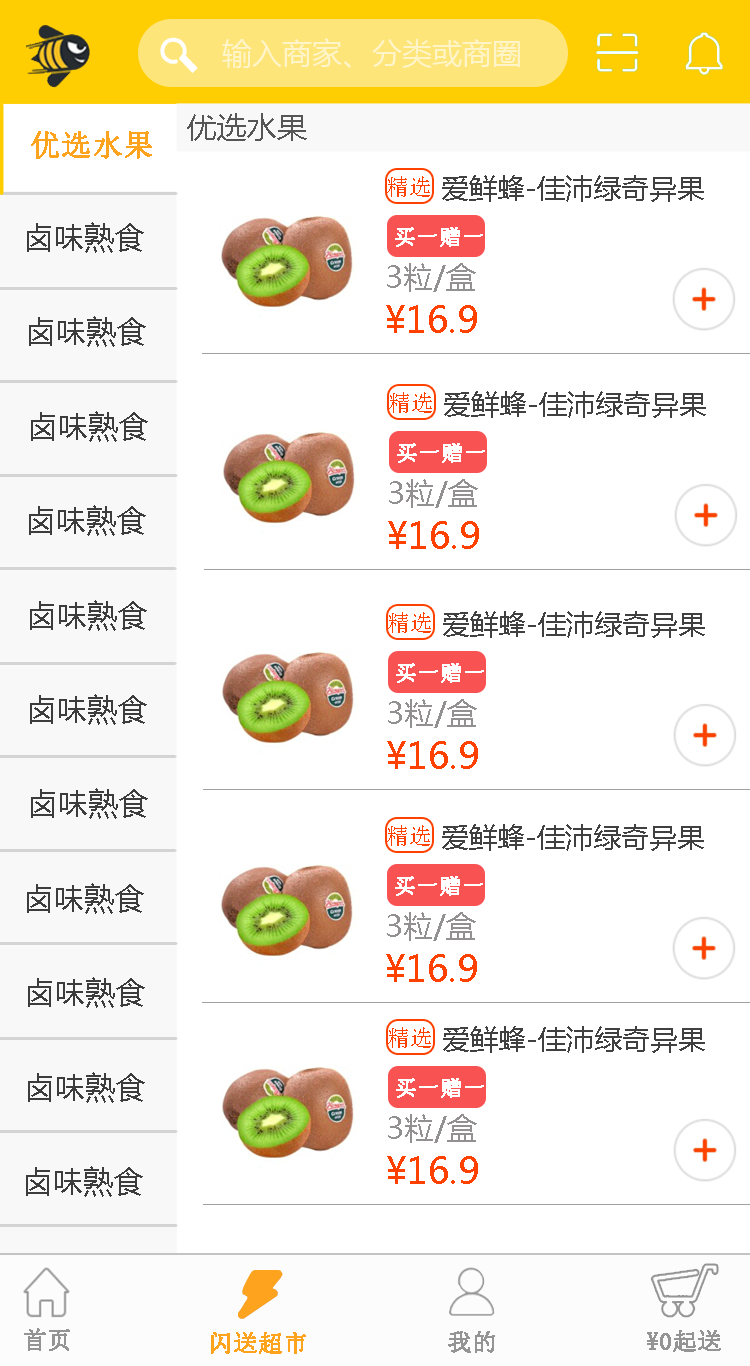
<style>
.page{position:relative;width:750px;height:1366px;background:#ffffff}
.page>*{position:absolute;margin:0}
.t1{font:30px "MicrosoftYaHei";color:#fff5c9}
.t2{font:30px "MicrosoftYaHei";color:#565656}
.t3{font:30px "SimSun";color:#fea31e;font-weight:bold}
.t4{font:23px "SimSun";color:#ff4100}
.t5{font:28px "MicrosoftYaHei";color:#404040}
.t6{font:30px "MicrosoftYaHei";color:#3c3c3c}
.t7{font:22px "SimSun";color:#ffffff;font-weight:bold}
.t8{font:30px "MicrosoftYaHei";color:#929091}
.t9{font:36px "MicrosoftYaHei";color:#ff4100}
.t10{font:24px "SimSun";color:#949494;font-weight:bold}
.t11{font:24px "SimSun";color:#fea31e;font-weight:bold}
</style>
<div class="page">
<p class="t1" style="left:222px;top:38px;width:298px;height:30px">输入商家、分类或商圈</p>
<p class="t2" style="left:187px;top:113px;width:120px;height:28px">优选水果</p>
<p class="t3" style="left:31px;top:131px;width:121px;height:28px">优选水果</p>
<p class="t4" style="left:387px;top:176px;width:43px;height:21px">精选</p>
<p class="t5" style="left:442px;top:175px;width:262px;height:27px">爱鲜蜂-佳沛绿奇异果</p>
<p class="t6" style="left:27px;top:222px;width:117px;height:31px">卤味熟食</p>
<p class="t7" style="left:395px;top:227px;width:88px;height:20px">买一赠一</p>
<p class="t8" style="left:387px;top:263px;width:89px;height:29px">3粒/盒</p>
<p class="t9" style="left:386px;top:305px;width:91px;height:28px">¥16.9</p>
<p class="t6" style="left:29px;top:316px;width:117px;height:31px">卤味熟食</p>
<p class="t4" style="left:389px;top:392px;width:43px;height:21px">精选</p>
<p class="t5" style="left:444px;top:391px;width:262px;height:27px">爱鲜蜂-佳沛绿奇异果</p>
<p class="t6" style="left:31px;top:411px;width:117px;height:31px">卤味熟食</p>
<p class="t7" style="left:397px;top:443px;width:88px;height:20px">买一赠一</p>
<p class="t8" style="left:389px;top:479px;width:89px;height:29px">3粒/盒</p>
<p class="t6" style="left:29px;top:505px;width:117px;height:31px">卤味熟食</p>
<p class="t9" style="left:388px;top:521px;width:91px;height:28px">¥16.9</p>
<p class="t6" style="left:30px;top:600px;width:117px;height:31px">卤味熟食</p>
<p class="t4" style="left:388px;top:612px;width:43px;height:21px">精选</p>
<p class="t5" style="left:443px;top:611px;width:262px;height:27px">爱鲜蜂-佳沛绿奇异果</p>
<p class="t7" style="left:396px;top:663px;width:88px;height:20px">买一赠一</p>
<p class="t6" style="left:30px;top:694px;width:117px;height:31px">卤味熟食</p>
<p class="t8" style="left:388px;top:699px;width:89px;height:29px">3粒/盒</p>
<p class="t9" style="left:387px;top:741px;width:91px;height:28px">¥16.9</p>
<p class="t6" style="left:31px;top:788px;width:117px;height:31px">卤味熟食</p>
<p class="t4" style="left:387px;top:825px;width:43px;height:21px">精选</p>
<p class="t5" style="left:442px;top:824px;width:262px;height:27px">爱鲜蜂-佳沛绿奇异果</p>
<p class="t7" style="left:395px;top:876px;width:88px;height:20px">买一赠一</p>
<p class="t6" style="left:27px;top:883px;width:117px;height:31px">卤味熟食</p>
<p class="t8" style="left:387px;top:912px;width:89px;height:29px">3粒/盒</p>
<p class="t9" style="left:386px;top:954px;width:91px;height:28px">¥16.9</p>
<p class="t6" style="left:28px;top:977px;width:117px;height:31px">卤味熟食</p>
<p class="t4" style="left:388px;top:1027px;width:43px;height:21px">精选</p>
<p class="t5" style="left:443px;top:1026px;width:262px;height:27px">爱鲜蜂-佳沛绿奇异果</p>
<p class="t6" style="left:28px;top:1072px;width:117px;height:31px">卤味熟食</p>
<p class="t7" style="left:396px;top:1078px;width:88px;height:20px">买一赠一</p>
<p class="t8" style="left:388px;top:1114px;width:89px;height:29px">3粒/盒</p>
<p class="t9" style="left:387px;top:1156px;width:91px;height:28px">¥16.9</p>
<p class="t6" style="left:26px;top:1166px;width:117px;height:31px">卤味熟食</p>
<p class="t10" style="left:24px;top:1328px;width:46px;height:23px">首页</p>
<p class="t11" style="left:211px;top:1332px;width:95px;height:22px">闪送超市</p>
<p class="t10" style="left:448px;top:1331px;width:47px;height:22px">我的</p>
<p class="t10" style="left:647px;top:1330px;width:74px;height:22px">¥0起送</p>
</div>
